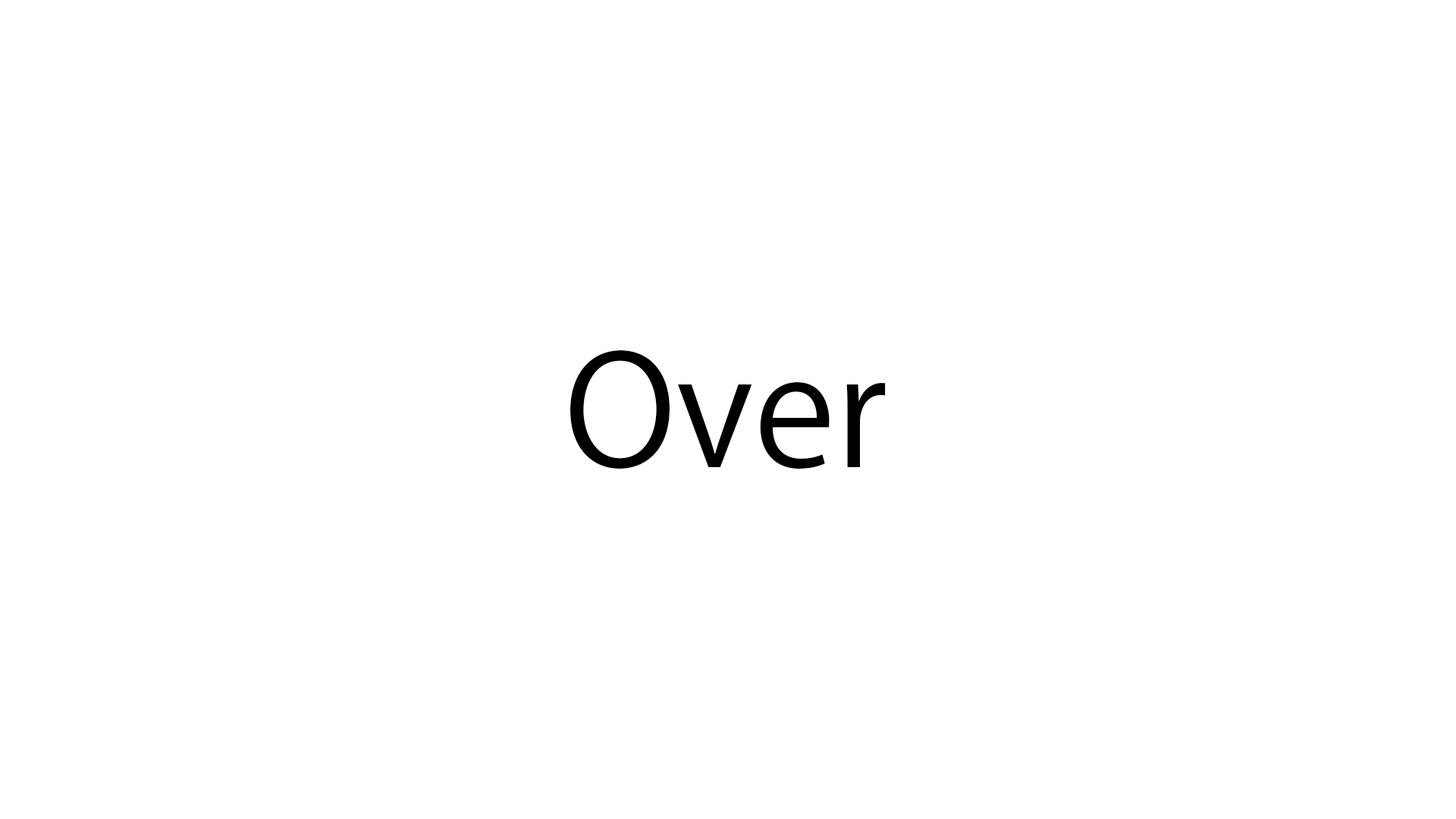
<style>
.page{position:relative;width:1456px;height:819px;background:#ffffff}
.page>*{position:absolute;margin:0}
.t1{font:151.7px "KozGoPr6N-Regular";color:#000000}
</style>
<div class="page">
<p class="t1" style="left:570px;top:350px;width:316px;height:119px">Over</p>
</div>
